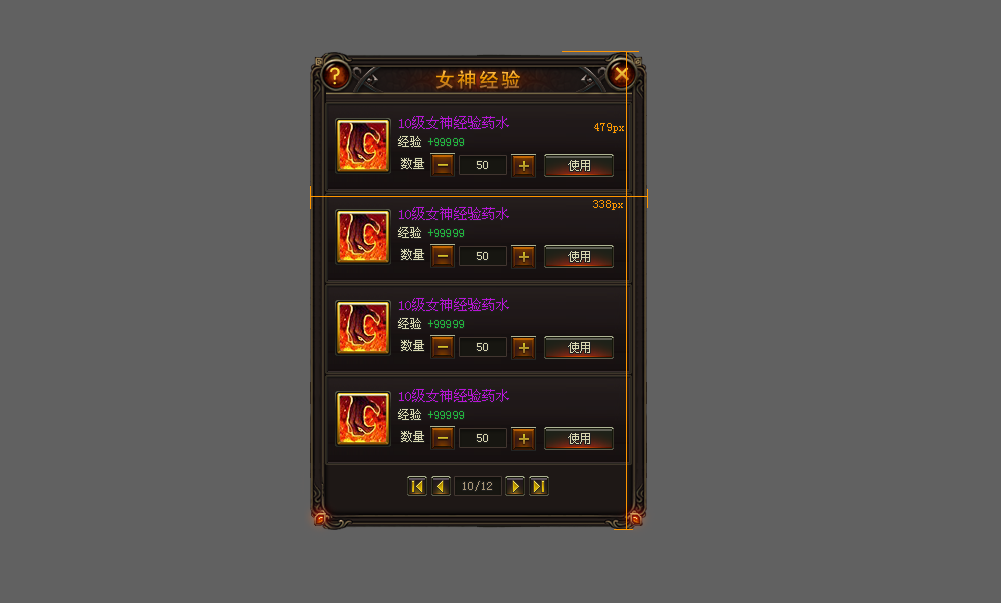
<style>
.page{position:relative;width:1001px;height:603px;background:#616161}
.page>*{position:absolute;margin:0}
.t1{font:20px "SimHei";letter-spacing:0.1em}
.t2{font:14px/20px "SimSun";color:#b715d4}
.t3{font:12px/20px "SimSun";color:#d8d6af}
.t4{font:12px/20px "SimSun";color:#22b33d}
.t5{font:12px "SimSun";color:#ff9600}
.t6{font:12px "SimSun";color:#d8d6af}
.t7{font:12px "SimSun";color:#a99877}
</style>
<div class="page">
<p class="t1" style="left:436px;top:70px;width:84px;height:19px">女神经验</p>
<p class="t2" style="left:398px;top:116px;width:111px;height:31px">10级女神经验药水       <br><span class="t3">经验 </span><span class="t4">+99999</span></p>
<p class="t5" style="left:594px;top:123px;width:30px;height:10px">479px</p>
<p class="t6" style="left:401px;top:158px;width:23px;height:11px">数量</p>
<p class="t6" style="left:477px;top:161px;width:11px;height:8px">50</p>
<p class="t6" style="left:568px;top:160px;width:22px;height:11px">使用</p>
<p class="t2" style="left:398px;top:207px;width:111px;height:31px">10级女神经验药水       <br><span class="t3">经验 </span><span class="t4">+99999</span></p>
<p class="t5" style="left:593px;top:200px;width:30px;height:10px">338px</p>
<p class="t6" style="left:401px;top:249px;width:23px;height:11px">数量</p>
<p class="t6" style="left:477px;top:252px;width:11px;height:8px">50</p>
<p class="t6" style="left:568px;top:251px;width:22px;height:11px">使用</p>
<p class="t2" style="left:398px;top:298px;width:111px;height:31px">10级女神经验药水       <br><span class="t3">经验 </span><span class="t4">+99999</span></p>
<p class="t6" style="left:401px;top:340px;width:23px;height:11px">数量</p>
<p class="t6" style="left:568px;top:342px;width:22px;height:11px">使用</p>
<p class="t6" style="left:477px;top:343px;width:11px;height:8px">50</p>
<p class="t2" style="left:398px;top:389px;width:111px;height:31px">10级女神经验药水       <br><span class="t3">经验 </span><span class="t4">+99999</span></p>
<p class="t6" style="left:401px;top:431px;width:23px;height:11px">数量</p>
<p class="t6" style="left:477px;top:434px;width:11px;height:8px">50</p>
<p class="t6" style="left:568px;top:433px;width:22px;height:11px">使用</p>
<p class="t7" style="left:463px;top:481px;width:29px;height:10px">10/12</p>
</div>
